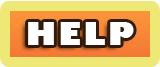
<style>
.page{position:relative;width:160px;height:67px;background:#eee977}
.page>*{position:absolute;margin:0}
.t1{font:30.5px "GillSans-UltraBold";letter-spacing:0.1em;color:#ffffff}
</style>
<div class="page">
<p class="t1" style="left:28px;top:22px;width:106px;height:23px">HELP</p>
</div>
